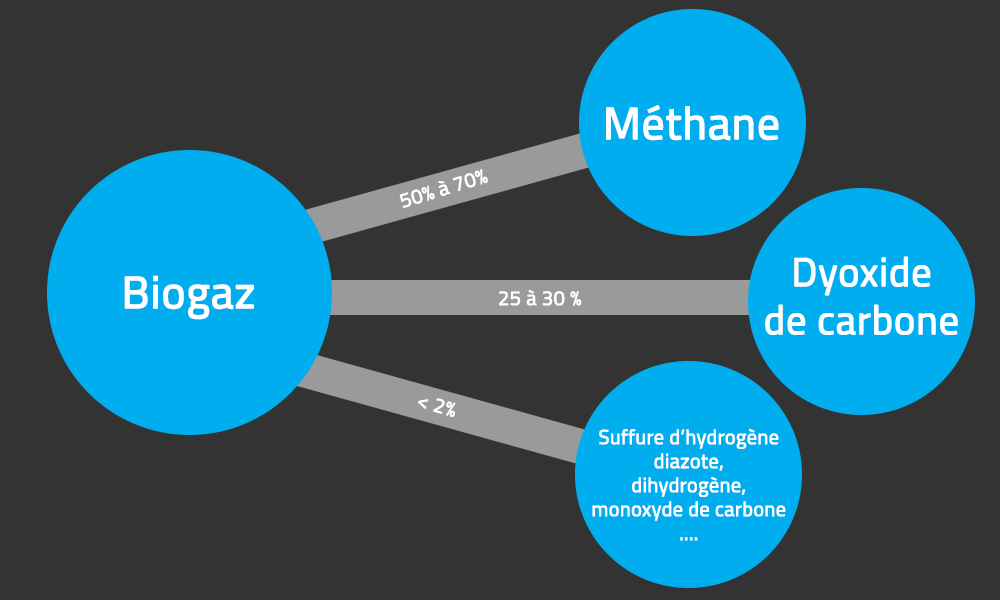
<style>
.page{position:relative;width:1000px;height:600px;background:#333333}
.page>*{position:absolute;margin:0}
.t1{font:45px "Titillium-Regular";color:#ffffff;font-weight:bold}
.t2{font:20px "Titillium-Regular";color:#ffffff;font-weight:bold}
.t3{font:40px "Titillium-Regular";color:#ffffff;font-weight:bold}
</style>
<div class="page">
<p class="t1" style="left:606px;top:105px;width:173px;height:36px">Méthane</p>
<p class="t2" style="left:399px;top:169px;width:89px;height:39px;rotate:-17deg">50% à 70%</p>
<p class="t3" style="left:765px;top:256px;width:193px;height:79px;text-align:center">Dyoxide<br>de carbone</p>
<p class="t1" style="left:124px;top:275px;width:130px;height:45px">Biogaz</p>
<p class="t2" style="left:499px;top:289px;width:83px;height:17px">25 à 30 %</p>
<p class="t2" style="left:418px;top:398px;width:38px;height:19px;rotate:16deg">&lt; 2%</p>
<p class="t2" style="left:592px;top:428px;width:194px;height:113px;text-align:center">Suffure d’hydrogène<br>diazote,<br>dihydrogène,<br>monoxyde de carbone<br>....</p>
</div>
